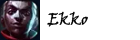
<style>
.page{position:relative;width:140px;height:40px;background:#ffffff}
.page>*{position:absolute;margin:0}
.t1{font:12px "VinerHandITC";color:#000000}
</style>
<div class="page">
<p class="t1" style="left:47px;top:11px;width:41px;height:16px">Ekko</p>
</div>
